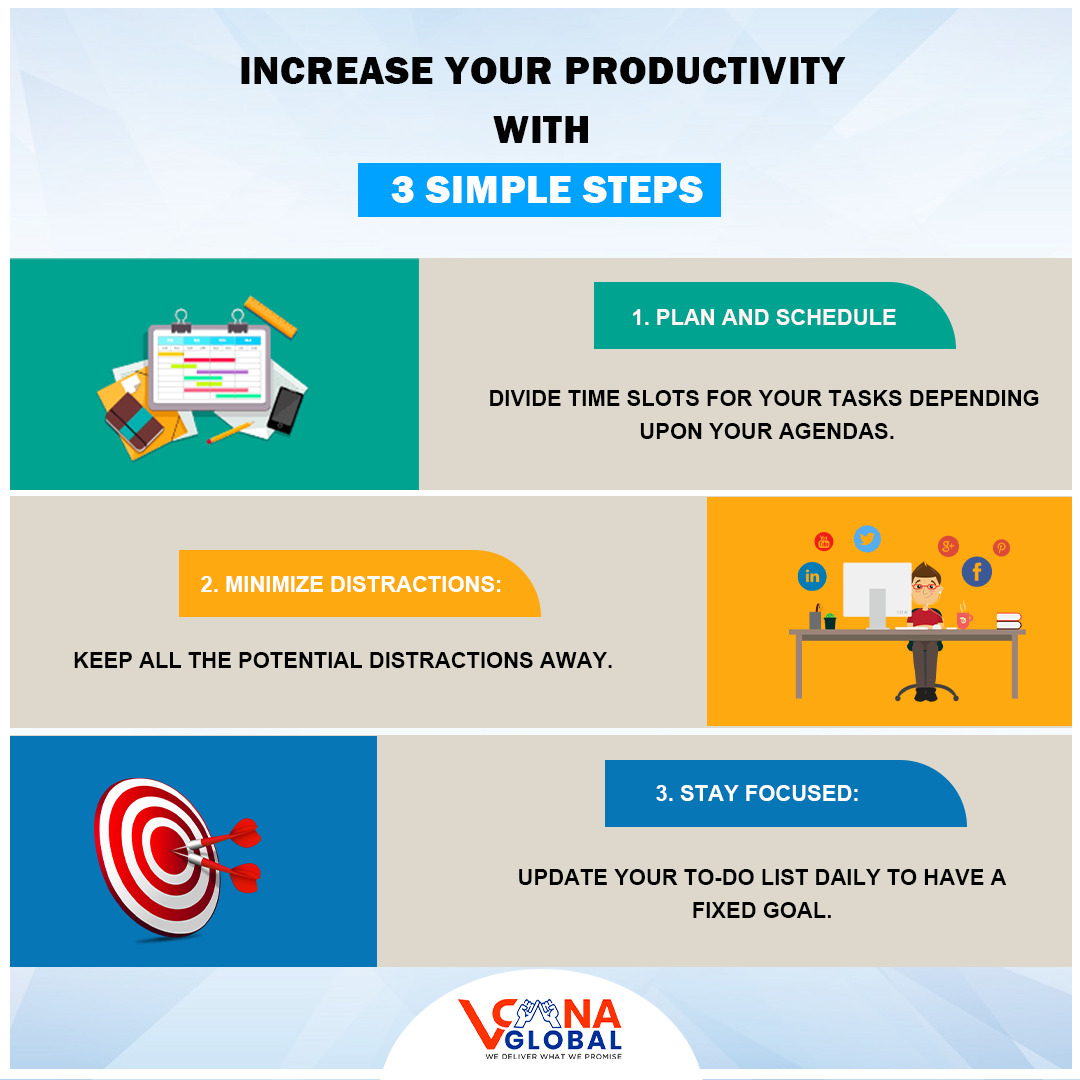
<style>
.page{position:relative;width:1080px;height:1080px;background:#ded8cc}
.page>*{position:absolute;margin:0}
.t1{font:39.7px/59.5px "FranklinGothic-Heavy";letter-spacing:0.025em;color:#020202;text-transform:uppercase}
.t2{font:39.7px/59.5px "FranklinGothic-Heavy";letter-spacing:0.025em;color:#ffffff;text-transform:uppercase}
.t3{font:22px "Arial-BoldMT";color:#fff4f4;text-transform:uppercase}
.t4{font:22px/33px "Arial-BoldMT";color:#020202;text-transform:uppercase}
.t5{font:22px "Arial-BoldMT";color:#ffffff;text-transform:uppercase}
.t6{font:22px "Arial-BoldMT";color:#020202;text-transform:uppercase}
</style>
<div class="page">
<p class="t1" style="left:241px;top:57px;width:605px;height:146px;text-align:center">Increase your Productivity <br>with <br><span class="t2">3 Simple Steps</span></p>
<p class="t3" style="left:633px;top:309px;width:263px;height:16px">1. Plan and Schedule</p>
<p class="t4" style="left:490px;top:390px;width:549px;height:49px;text-align:center">Divide time slots for your tasks depending <br>upon your agendas.</p>
<p class="t5" style="left:201px;top:576px;width:300px;height:16px">2. Minimize Distractions:</p>
<p class="t6" style="left:74px;top:652px;width:538px;height:16px">Keep all the potential distractions away.</p>
<p class="t5" style="left:656px;top:785px;width:202px;height:16px">3. Stay Focused:</p>
<p class="t4" style="left:519px;top:869px;width:488px;height:49px;text-align:center">Update your to-do list daily to have a <br>fixed goal.</p>
</div>
